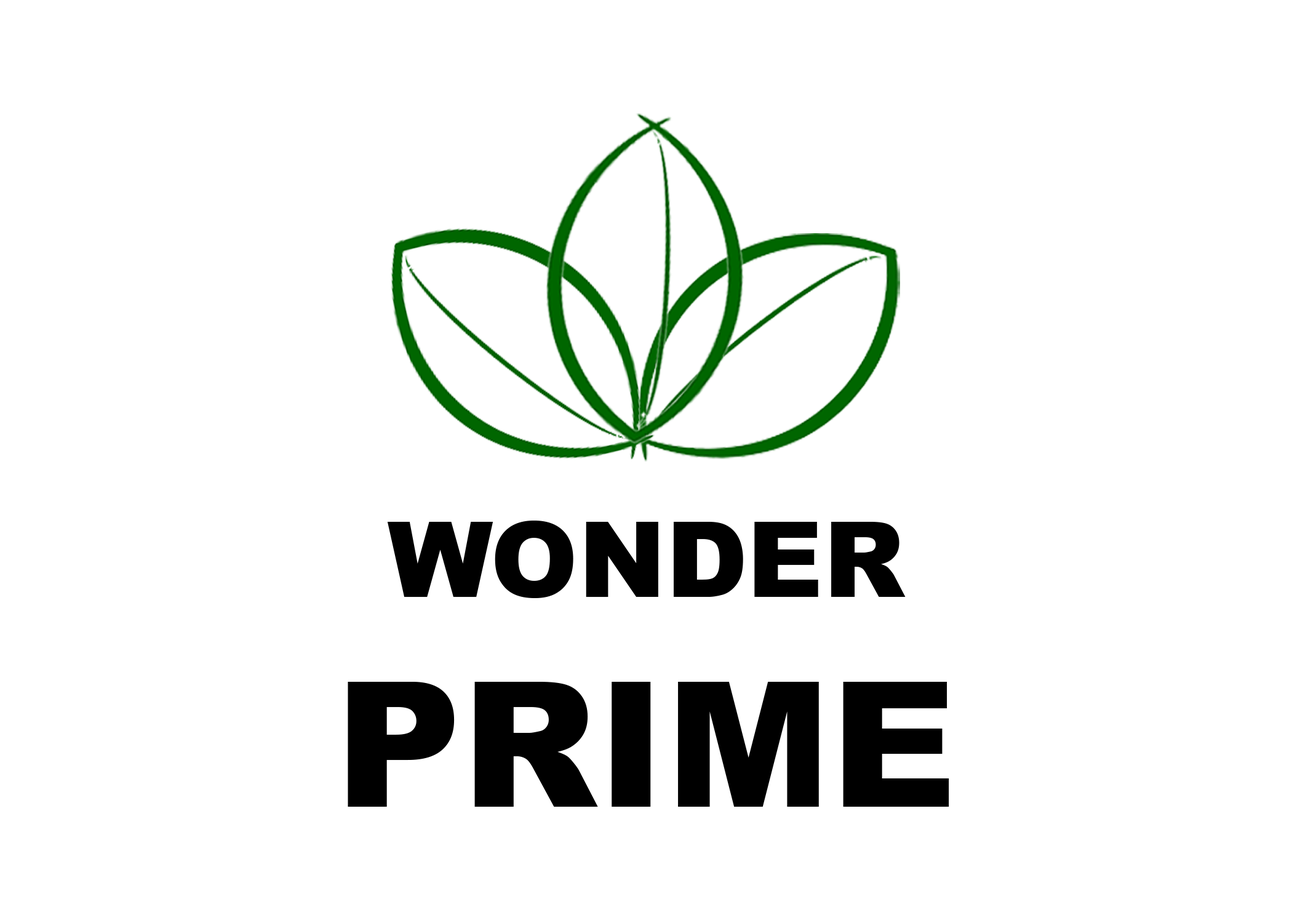
<style>
.page{position:relative;width:1292px;height:923px;background:#ffffff}
.page>*{position:absolute;margin:0}
.t1{font:105px "Arial-Black";color:#000000}
.t2{font:175px "Arial-Black";color:#000000}
</style>
<div class="page">
<p class="t1" style="left:348px;top:521px;width:601px;height:286px;text-align:center">WONDER<br><span class="t2">PRIME</span></p>
</div>
